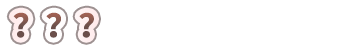
<style>
.page{position:relative;width:360px;height:50px;background:#ffffff}
.page>*{position:absolute;margin:0}
.t1{font:32px "SourceHanSansSC-Bold";font-weight:bold}
</style>
<div class="page">
<p class="t1" style="left:13px;top:12px;width:81px;height:26px">？？？</p>
</div>
